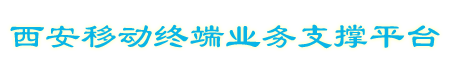
<style>
.page{position:relative;width:450px;height:70px;background:#ffffff}
.page>*{position:absolute;margin:0}
.t1{font:36px "LiSu";color:#09b5e7}
</style>
<div class="page">
<p class="t1" style="left:10px;top:24px;width:430px;height:25px">西安移动终端业务支撑平台</p>
</div>
